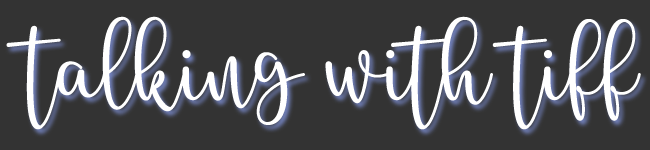
<style>
.page{position:relative;width:650px;height:150px;background:#333333}
.page>*{position:absolute;margin:0}
.t1{font:93px "Artis";color:#ffffff}
</style>
<div class="page">
<p class="t1" style="left:6px;top:16px;width:635px;height:114px">talking with tiff</p>
</div>
